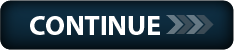
<style>
.page{position:relative;width:234px;height:50px}
.page>*{position:absolute;margin:0}
.t1{font:28px "MyriadPro-Bold";color:#ffffff}
</style>
<div class="page">
<p class="t1" style="left:30px;top:16px;width:130px;height:19px">CONTINUE</p>
</div>
